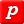
<style>
.page{position:relative;width:24px;height:24px;background:#ff0000}
.page>*{position:absolute;margin:0}
.t1{font:18px "BookmanOldStyle-BoldItalic";color:#ffffff}
</style>
<div class="page">
<p class="t1" style="left:5px;top:6px;width:14px;height:13px">p</p>
</div>
